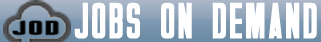
<style>
.page{position:relative;width:321px;height:42px;background:#ffffff}
.page>*{position:absolute;margin:0}
.t1{font:51.9px "Overseer";letter-spacing:0.05em;color:#ffffff;font-weight:bold;scale:0.7 1}
</style>
<div class="page">
<p class="t1" style="left:74px;top:2px;width:243px;height:37px">J0BS 0N DEMAND</p>
</div>
